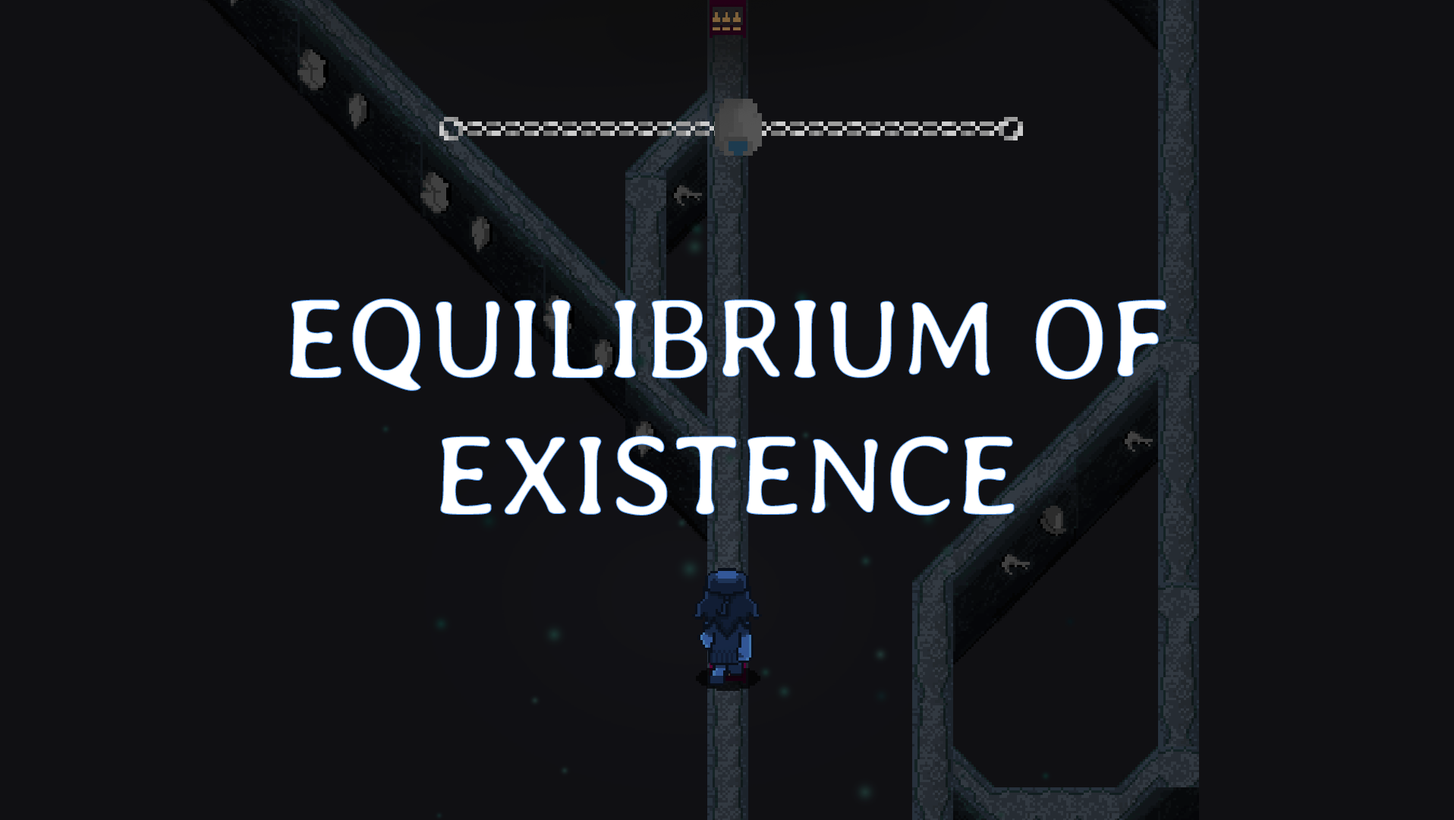
<style>
.page{position:relative;width:1454px;height:820px;background:#101013}
.page>*{position:absolute;margin:0}
.t1{font:113.9px "AveriaLibre-Regular";color:#ffffff}
</style>
<div class="page">
<p class="t1" style="left:290px;top:298px;width:877px;height:217px;text-align:center">EQUILIBRIUM OF EXISTENCE</p>
</div>
